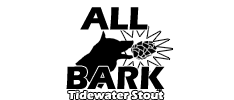
<style>
.page{position:relative;width:234px;height:100px;background:#ffffff}
.page>*{position:absolute;margin:0}
.t1{font:33.3px/59.5px "ErasITC-Bold";color:#000000}
.t2{font:2.3px "ErasITC-Bold";color:#000000}
.t3{font:11.8px "ErasITC-Bold";color:#ffffff}
</style>
<div class="page">
<p class="t1" style="left:66px;top:7px;width:99px;height:82px;text-align:center">ALL<br>BARK</p>
<p class="t2" style="left:156px;top:89px;width:6px;height:2px">ABV</p>
<p class="t3" style="left:68px;top:90px;width:96px;height:10px">Tidewater Stout</p>
</div>
